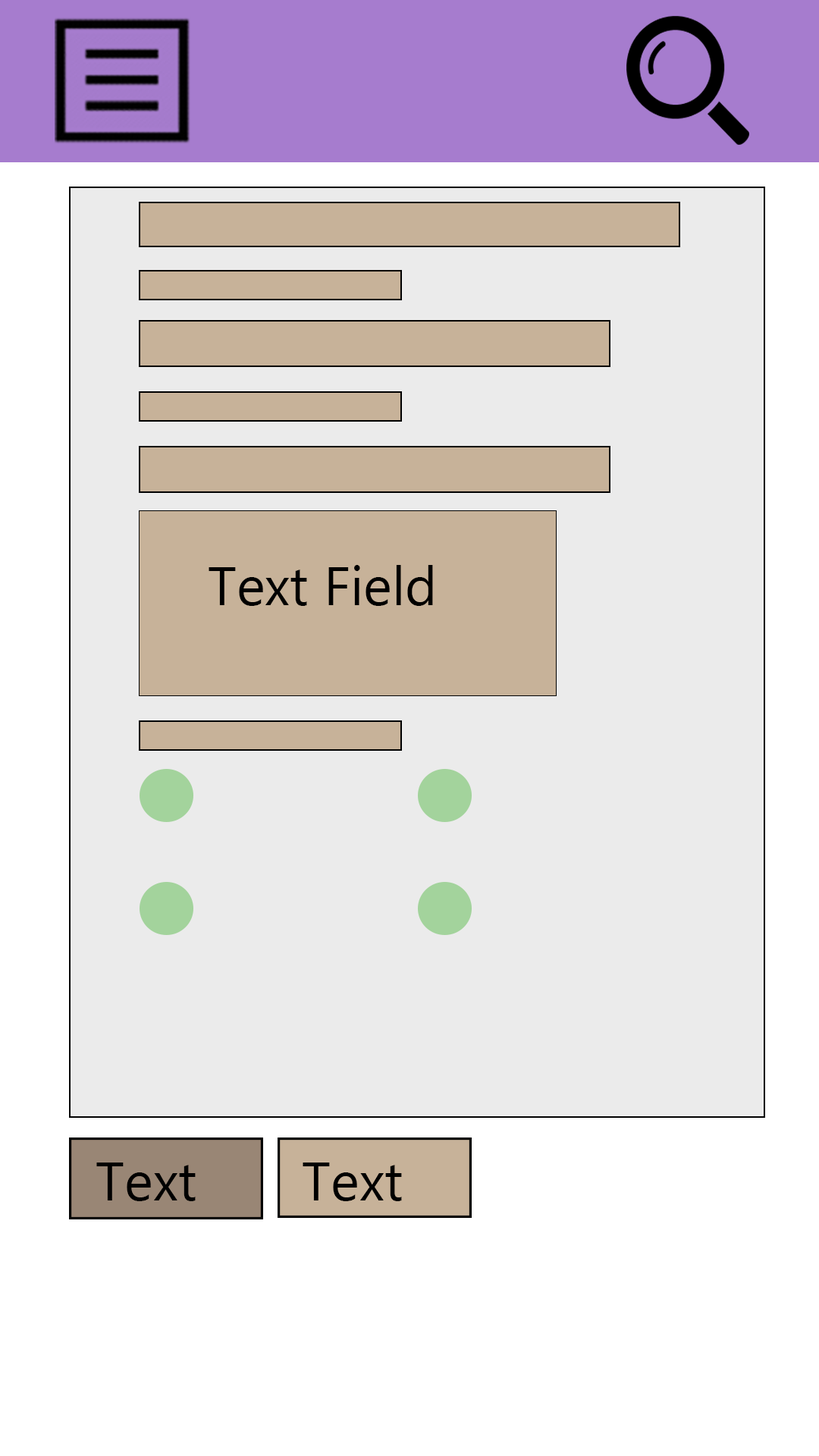
<style>
.page{position:relative;width:819px;height:1456px;background:#ebebeb}
.page>*{position:absolute;margin:0}
.t1{font:54.6px "MicrosoftNewTaiLue";color:#000000}
</style>
<div class="page">
<p class="t1" style="left:209px;top:565px;width:224px;height:41px">Text Field</p>
<p class="t1" style="left:96px;top:1163px;width:100px;height:38px">Text</p>
<p class="t1" style="left:303px;top:1163px;width:99px;height:38px">Text</p>
</div>
